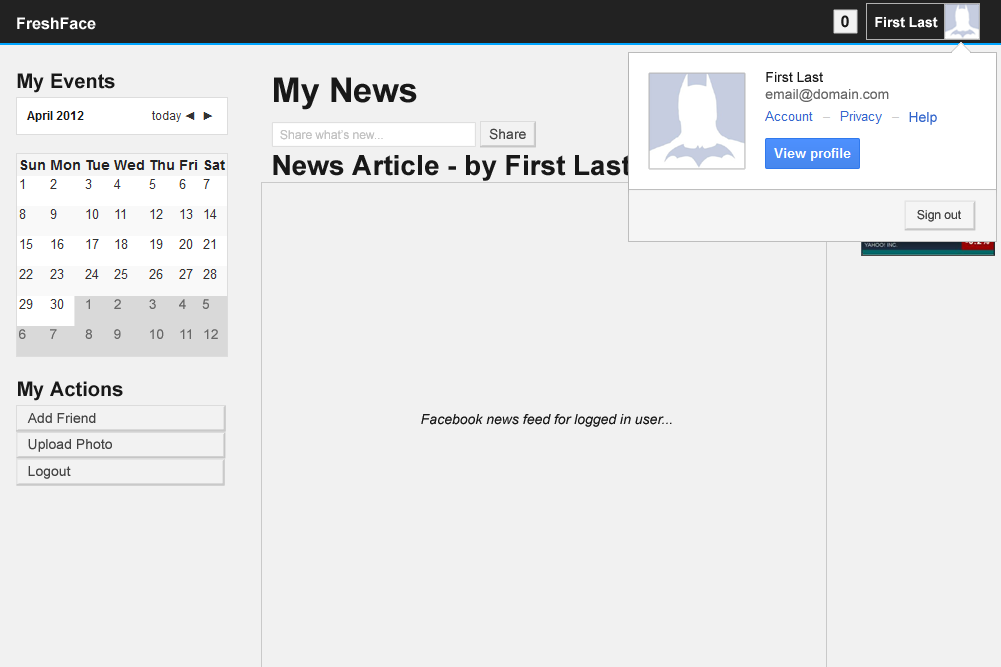
<style>
.page{position:relative;width:1001px;height:667px;background:#f1f1f1}
.page>*{position:absolute;margin:0}
.t1{font:16px "Arial-BoldMT";color:#ffffff}
.t2{font:16px "Arial-BoldMT";color:#181818}
.t3{font:14px "Arial-BoldMT";color:#ffffff}
.t4{font:20px "Arial-BoldMT";color:#181818}
.t5{font:34px "Arial-BoldMT";color:#181818}
.t6{font:14px "ArialMT";color:#181818}
.t7{font:14px "ArialMT";color:#666666}
.t8{font:12px "ArialMT";color:#c2c2c2}
.t9{font:14px "ArialMT";color:#444444}
.t10{font:28px "Arial-BoldMT";color:#181818}
.t11{font:12px "ArialMT";color:#444444}
.t12{font:14px "Arial-ItalicMT";color:#181818}
</style>
<div class="page">
<p class="t1" style="left:17px;top:17px;width:79px;height:13px">FreshFace</p>
<p class="t2" style="left:841px;top:15px;width:8px;height:13px">0</p>
<p class="t3" style="left:875px;top:17px;width:63px;height:11px">First Last</p>
<p class="t4" style="left:17px;top:73px;width:98px;height:20px">My Events</p>
<p class="t5" style="left:274px;top:77px;width:143px;height:33px">My News</p>
<p class="t6" style="left:766px;top:72px;width:57px;height:10px">First Last</p>
<p class="t7" style="left:765px;top:89px;width:124px;height:13px">email@domain.com</p>
<p class="t8" style="left:280px;top:130px;width:103px;height:10px">Share what’s new...</p>
<p class="t9" style="left:489px;top:128px;width:37px;height:12px">Share</p>
<p class="t10" style="left:273px;top:155px;width:358px;height:26px">News Article - by First Last</p>
<p class="t11" style="left:917px;top:210px;width:44px;height:12px">Sign out</p>
<p class="t4" style="left:18px;top:381px;width:105px;height:20px">My Actions</p>
<p class="t9" style="left:27px;top:413px;width:69px;height:10px">Add Friend</p>
<p class="t12" style="left:421px;top:414px;width:251px;height:13px">Facebook news feed for logged in user...</p>
<p class="t9" style="left:28px;top:439px;width:84px;height:13px">Upload Photo</p>
<p class="t9" style="left:28px;top:466px;width:43px;height:13px">Logout</p>
</div>
